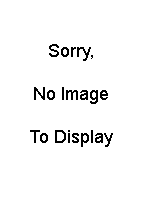
<style>
.page{position:relative;width:150px;height:200px;background:#ffffff}
.page>*{position:absolute;margin:0}
.t1{font:18px "ArialMT";color:#000000}
</style>
<div class="page">
<p class="t1" style="left:30px;top:44px;width:83px;height:103px;text-align:center">Sorry,<br><br>No Image<br><br>To Display</p>
</div>
